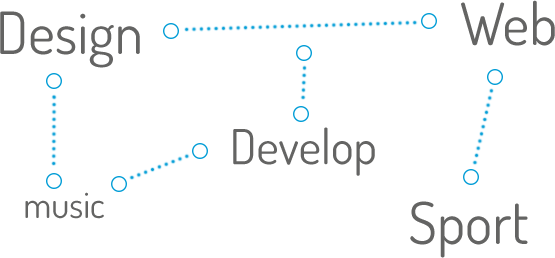
<style>
.page{position:relative;width:555px;height:258px;background:#ffffff}
.page>*{position:absolute;margin:0}
.t1{font:58.1px "Dosis-Regular";color:#646463}
.t2{font:48.3px "Dosis-Regular";color:#646463}
.t3{font:36.1px "Dosis-Regular";color:#646463}
</style>
<div class="page">
<p class="t1" style="left:461px;top:0px;width:94px;height:46px">Web</p>
<p class="t1" style="left:0px;top:11px;width:140px;height:57px">Design</p>
<p class="t2" style="left:233px;top:127px;width:142px;height:49px">Develop</p>
<p class="t3" style="left:25px;top:192px;width:79px;height:27px">music</p>
<p class="t1" style="left:410px;top:201px;width:118px;height:57px">Sport</p>
</div>
